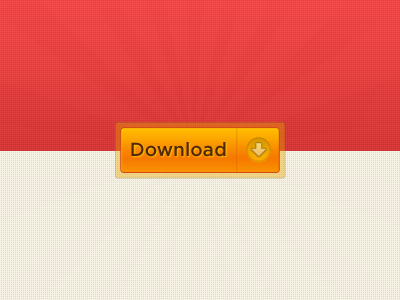
<style>
.page{position:relative;width:400px;height:300px}
.page>*{position:absolute;margin:0}
.t1{font:19px "Gotham-Medium";color:#522907}
</style>
<div class="page">
<p class="t1" style="left:131px;top:142px;width:95px;height:15px">Download</p>
</div>
